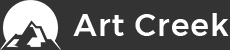
<style>
.page{position:relative;width:230px;height:50px;background:#333333}
.page>*{position:absolute;margin:0}
.t1{font:31px "Montserrat-Medium";letter-spacing:0.04em;color:#ffffff}
</style>
<div class="page">
<p class="t1" style="left:73px;top:13px;width:156px;height:23px">Art Creek</p>
</div>
